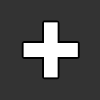
<style>
.page{position:relative;width:100px;height:100px;background:#333333}
.page>*{position:absolute;margin:0}
.t1{font:100px "DigitalSerialXbold";color:#ffffff;text-transform:uppercase}
</style>
<div class="page">
<p class="t1" style="left:23px;top:22px;width:55px;height:56px">+</p>
</div>
